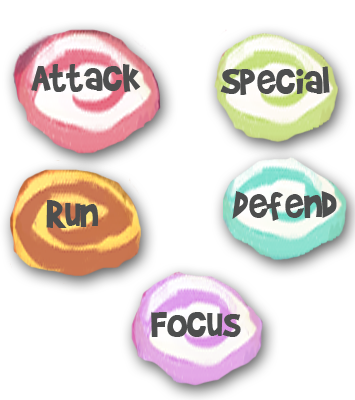
<style>
.page{position:relative;width:355px;height:400px;background:#ffffff}
.page>*{position:absolute;margin:0}
.t1{font:43.8px "BradyBunchRemastered";color:#4d4e4e}
</style>
<div class="page">
<p class="t1" style="left:31px;top:64px;width:110px;height:28px">Attack</p>
<p class="t1" style="left:220px;top:66px;width:110px;height:29px">Special</p>
<p class="t1" style="left:232px;top:191px;width:105px;height:30px">Defend</p>
<p class="t1" style="left:46px;top:200px;width:52px;height:28px">Run</p>
<p class="t1" style="left:151px;top:312px;width:90px;height:25px">Focus</p>
</div>
